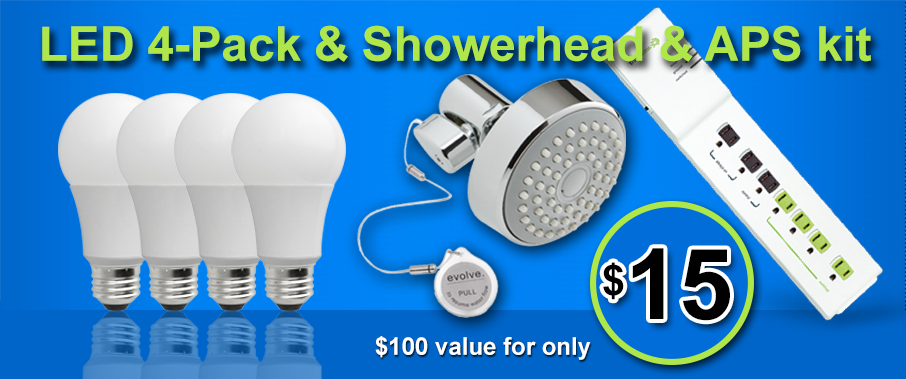
<style>
.page{position:relative;width:906px;height:379px}
.page>*{position:absolute;margin:0}
.t1{font:48px "Arial-BoldMT";letter-spacing:-0.005em;color:#afe64a}
.t2{font:98.2px "Arial-BoldMT";letter-spacing:-0.005em;color:#000000}
.t3{font:72px "Arial-BoldMT";letter-spacing:-0.005em;color:#000000}
.t4{font:24.3px "Arial-BoldMT";letter-spacing:-0.005em;color:#ffffff}
</style>
<div class="page">
<p class="t1" style="left:42px;top:25px;width:829px;height:37px">LED 4-Pack &amp; Showerhead &amp; APS kit</p>
<p class="t2" style="left:603px;top:248px;width:127px;height:73px"><span class="t3">$</span>15</p>
<p class="t4" style="left:375px;top:336px;width:216px;height:24px">$100 value for only</p>
</div>
